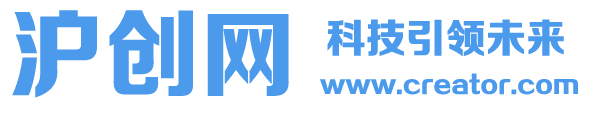
<style>
.page{position:relative;width:600px;height:113px;background:#ffffff}
.page>*{position:absolute;margin:0}
.t1{font:96px "FZZDHJW--GB1-0";color:#4c9aec}
.t2{font:40px "FZZDHJW--GB1-0";color:#4c9aec}
.t3{font:24px "FZZDHJW--GB1-0";color:#4c9aec}
</style>
<div class="page">
<p class="t1" style="left:12px;top:10px;width:277px;height:88px">沪创网</p>
<p class="t2" style="left:327px;top:19px;width:237px;height:38px">科技引领未来</p>
<p class="t3" style="left:320px;top:73px;width:258px;height:22px">www.creator.com</p>
</div>
